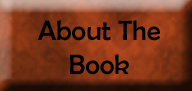
<style>
.page{position:relative;width:192px;height:91px}
.page>*{position:absolute;margin:0}
.t1{font:27.9px "BerlinSansFB-Reg";color:#000000}
</style>
<div class="page">
<p class="t1" style="left:38px;top:20px;width:122px;height:55px;text-align:center">About The Book</p>
</div>
